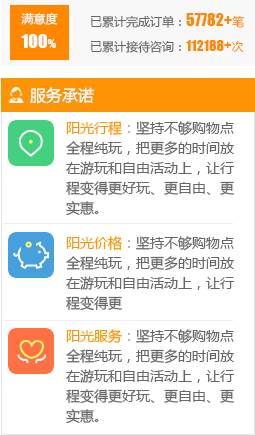
<style>
.page{position:relative;width:255px;height:435px;background:#ffffff}
.page>*{position:absolute;margin:0}
.t1{font:12px/25px "MicrosoftYaHei";color:#ffffff}
.t2{font:18px/25px "Impact";color:#ffffff}
.t3{font:12px/25px "Impact";color:#ffffff}
.t4{font:12px/25px "MicrosoftYaHei";color:#666666}
.t5{font:16px/25px "Impact";color:#ff8800}
.t6{font:12px/25px "MicrosoftYaHei";color:#ff8800}
.t7{font:14px/25px "Impact";color:#ff8800}
.t8{font:16px "MicrosoftYaHei";color:#ffffff}
.t9{font:14px/20px "MicrosoftYaHei";color:#666666}
.t10{font:14px/20px "MicrosoftYaHei";color:#fc9404}
.t11{font:14px/20px "MicrosoftYaHei";color:#a4a4a4}
</style>
<div class="page">
<p class="t1" style="left:21px;top:12px;width:37px;height:36px">满意度<br><span class="t2">100</span><span class="t3">%</span></p>
<p class="t4" style="left:90px;top:13px;width:155px;height:40px">已累计完成订单：<span class="t5">57782+</span><span class="t6">笔<br></span>已累计接待咨询：<span class="t7">112188+</span><span class="t6">次</span></p>
<p class="t8" style="left:30px;top:87px;width:64px;height:17px">服务承诺</p>
<p class="t9" style="left:66px;top:121px;width:168px;height:95px"><span class="t10">阳光行程</span><span class="t11">：</span>坚持不够购物点<br>全程纯玩，把更多的时间放<br>在游玩和自由活动上，让行<br>程变得更好玩、更自由、更<br>实惠。</p>
<p class="t9" style="left:66px;top:236px;width:168px;height:75px"><span class="t10">阳光价格</span><span class="t11">：</span>坚持不够购物点<br>全程纯玩，把更多的时间放<br>在游玩和自由活动上，让行<br>程变得更</p>
<p class="t9" style="left:66px;top:329px;width:168px;height:95px"><span class="t10">阳光服务</span><span class="t11">：</span>坚持不够购物点<br>全程纯玩，把更多的时间放<br>在游玩和自由活动上，让行<br>程变得更好玩、更自由、更<br>实惠。</p>
</div>
